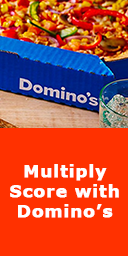
<style>
.page{position:relative;width:128px;height:256px;background:#ff3100}
.page>*{position:absolute;margin:0}
.t1{font:17px/20px "Verdana-Bold";letter-spacing:0.03em;color:#ffffff;font-weight:bold}
</style>
<div class="page">
<p class="t1" style="left:10px;top:164px;width:109px;height:54px;text-align:center">Multiply<br>Score with<br>Domino’s</p>
</div>
